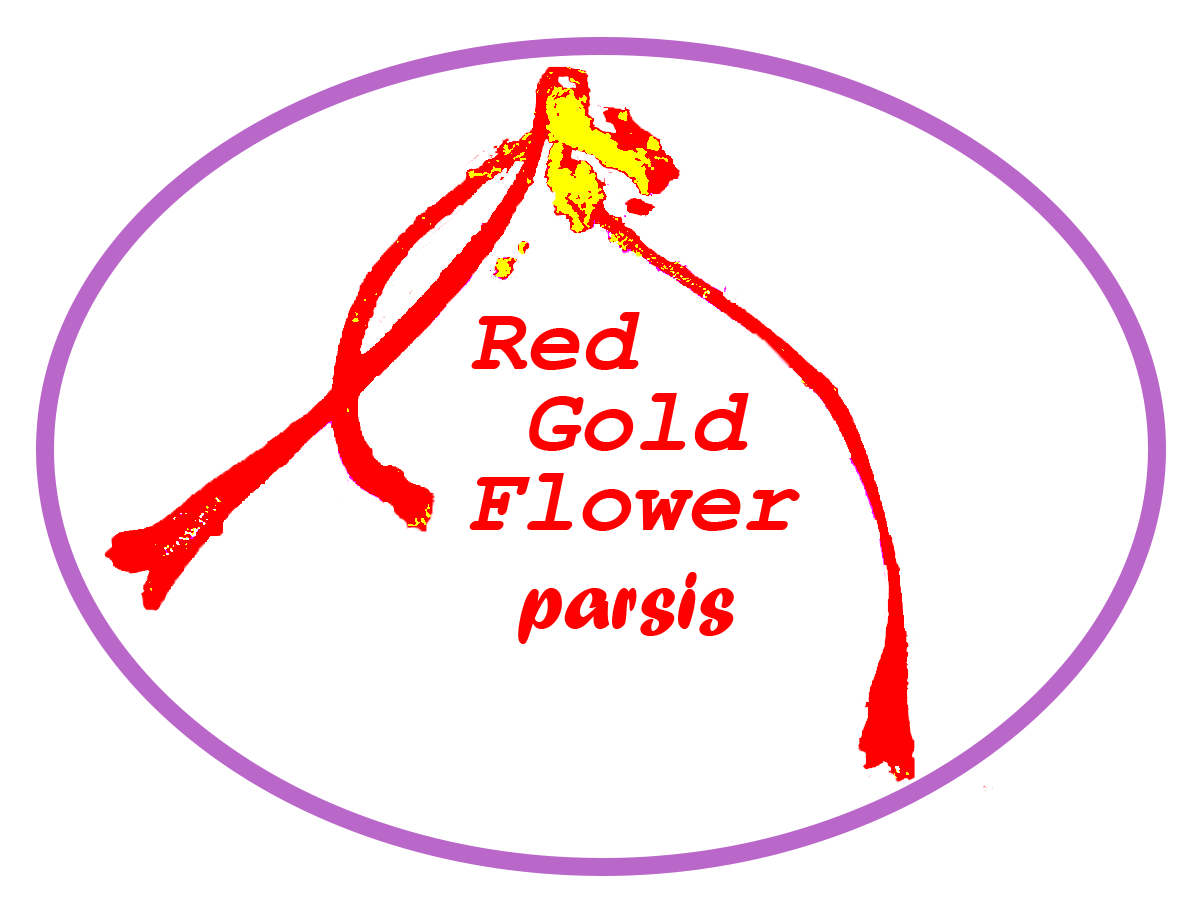
<style>
.page{position:relative;width:1200px;height:900px;background:#ffffff}
.page>*{position:absolute;margin:0}
.t1{font:92px "CourierNewPS-BoldItalicMT";color:#ff0000}
.t2{font:85px "ForteMT";color:#ff0000}
</style>
<div class="page">
<p class="t1" style="left:471px;top:312px;width:169px;height:58px">Red</p>
<p class="t1" style="left:529px;top:393px;width:220px;height:58px">Gold</p>
<p class="t1" style="left:469px;top:473px;width:331px;height:58px">Flower</p>
<p class="t2" style="left:518px;top:572px;width:216px;height:72px">parsis</p>
</div>
